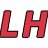
<style>
.page{position:relative;width:48px;height:48px;background:#ffffff}
.page>*{position:absolute;margin:0}
.t1{font:35px "DejaVuSansCondensed-BoldOblique";color:#dc3545}
</style>
<div class="page">
<p class="t1" style="left:0px;top:11px;width:18px;height:26px">L</p>
<p class="t1" style="left:22px;top:11px;width:26px;height:27px">H</p>
</div>
